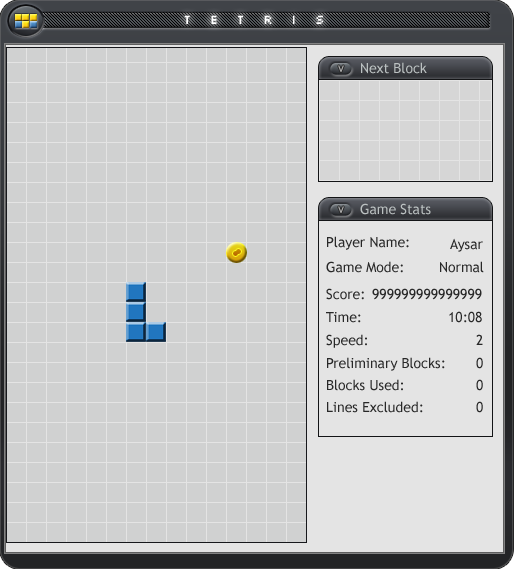
<style>
.page{position:relative;width:514px;height:569px;background:#d0d1d1}
.page>*{position:absolute;margin:0}
.t1{font:14px "Silkscreen-Expanded";color:#ffffff}
.t2{font:12px "Tahoma";color:#aaaaaa}
.t3{font:14px "TrebuchetMS";color:#bbc1c1}
.t4{font:14px "TrebuchetMS";color:#282828}
</style>
<div class="page">
<p class="t1" style="left:184px;top:15px;width:139px;height:9px">T  E  T  R  I  S</p>
<p class="t2" style="left:338px;top:65px;width:6px;height:7px">v</p>
<p class="t3" style="left:361px;top:62px;width:66px;height:12px">Next Block</p>
<p class="t2" style="left:338px;top:206px;width:6px;height:7px">v</p>
<p class="t3" style="left:360px;top:203px;width:71px;height:12px">Game Stats</p>
<p class="t4" style="left:327px;top:236px;width:82px;height:14px">Player Name:</p>
<p class="t4" style="left:450px;top:238px;width:33px;height:14px">Aysar</p>
<p class="t4" style="left:326px;top:261px;width:77px;height:12px">Game Mode:</p>
<p class="t4" style="left:440px;top:261px;width:44px;height:12px">Normal</p>
<p class="t4" style="left:326px;top:288px;width:38px;height:12px">Score:</p>
<p class="t4" style="left:372px;top:288px;width:110px;height:12px">999999999999999</p>
<p class="t4" style="left:326px;top:312px;width:35px;height:11px">Time:</p>
<p class="t4" style="left:449px;top:311px;width:33px;height:12px">10:08</p>
<p class="t4" style="left:326px;top:334px;width:41px;height:14px">Speed:</p>
<p class="t4" style="left:476px;top:334px;width:7px;height:11px">2</p>
<p class="t4" style="left:327px;top:357px;width:118px;height:14px">Preliminary Blocks:</p>
<p class="t4" style="left:476px;top:357px;width:7px;height:12px">0</p>
<p class="t4" style="left:327px;top:379px;width:76px;height:12px">Blocks Used:</p>
<p class="t4" style="left:476px;top:379px;width:7px;height:12px">0</p>
<p class="t4" style="left:327px;top:401px;width:96px;height:12px">Lines Excluded:</p>
<p class="t4" style="left:476px;top:401px;width:7px;height:12px">0</p>
</div>
